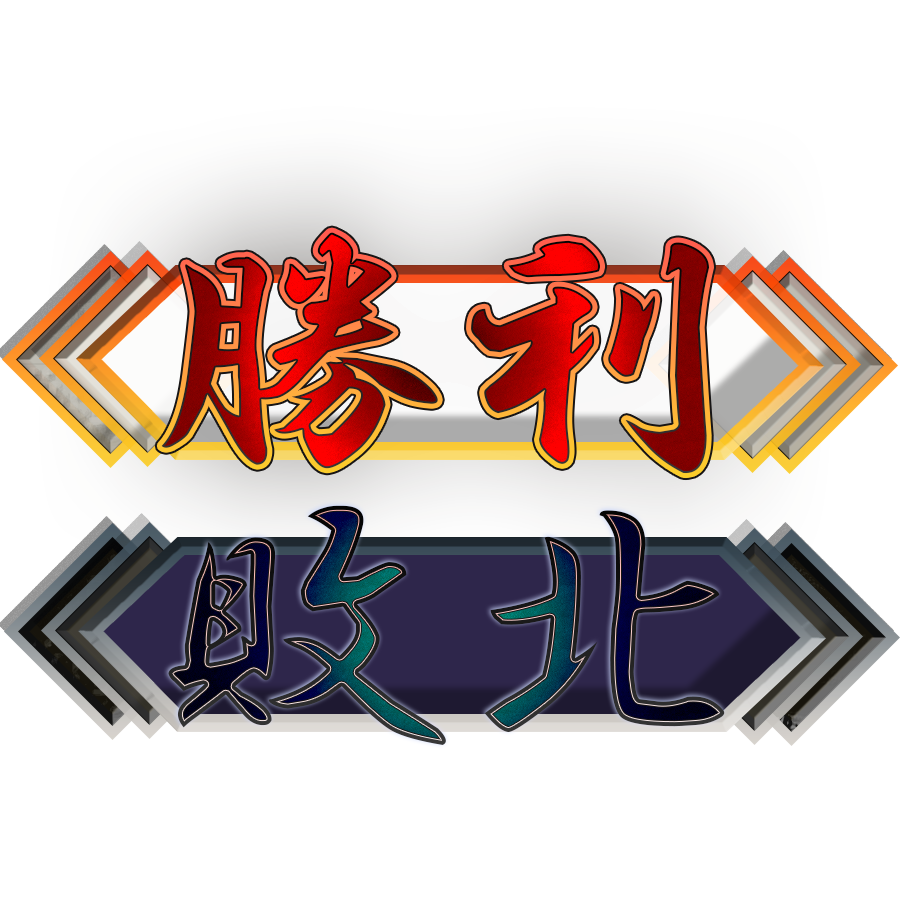
<style>
.page{position:relative;width:900px;height:900px;background:#ffffff}
.page>*{position:absolute;margin:0}
.t1{font:300px "HGSGyoshotai"}
</style>
<div class="page">
<p class="t1" style="left:161px;top:232px;width:548px;height:242px">勝利</p>
<p class="t1" style="left:168px;top:505px;width:557px;height:240px">敗北</p>
</div>
